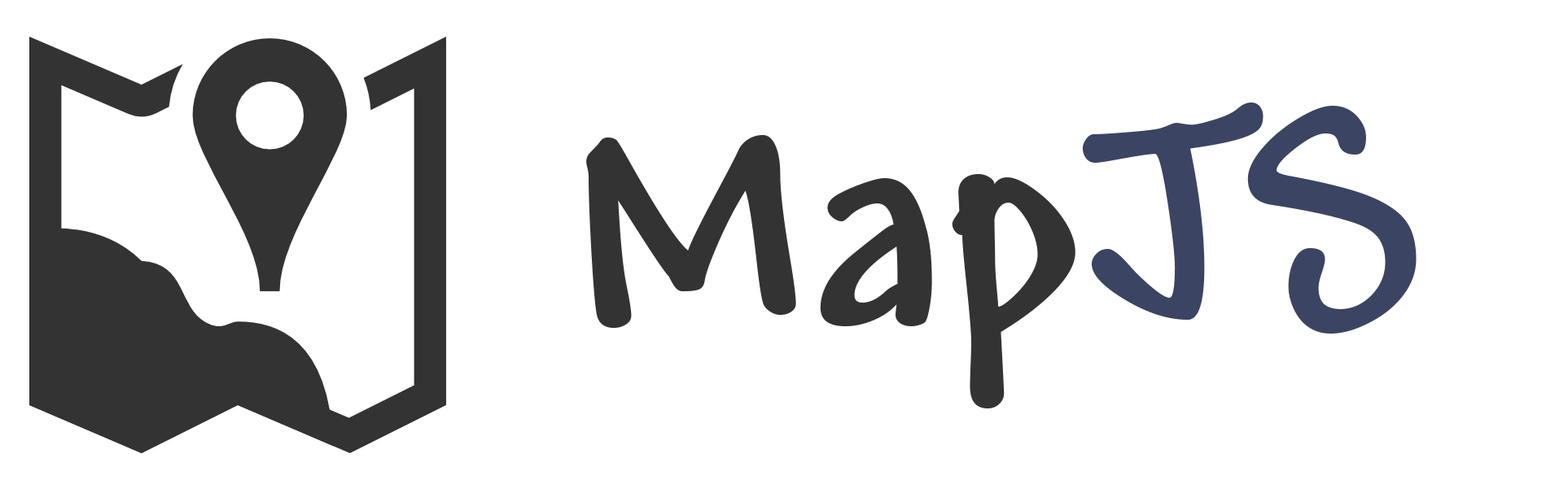
<style>
.page{position:relative;width:1568px;height:480px;background:#ffffff}
.page>*{position:absolute;margin:0}
.t1{font:320.6px "Andy-Bold";color:#333333}
.t2{font:320.6px "Andy-Bold";color:#3b4462}
</style>
<div class="page">
<p class="t1" style="left:586px;top:103px;width:831px;height:306px">Map<span class="t2">JS</span></p>
</div>
